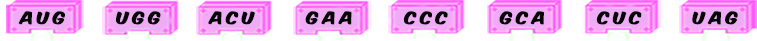
<style>
.page{position:relative;width:757px;height:41px;background:#ffffff}
.page>*{position:absolute;margin:0}
.t1{font:14.5px "KomikaAxis";letter-spacing:0.2em;color:#000000;scale:1.27 1}
</style>
<div class="page">
<p class="t1" style="left:18px;top:11px;width:47px;height:14px">aug</p>
<p class="t1" style="left:116px;top:11px;width:45px;height:14px">ugg</p>
<p class="t1" style="left:208px;top:11px;width:47px;height:14px">acu</p>
<p class="t1" style="left:305px;top:11px;width:47px;height:14px">gaa</p>
<p class="t1" style="left:403px;top:11px;width:45px;height:14px">ccc</p>
<p class="t1" style="left:499px;top:11px;width:45px;height:14px">gca</p>
<p class="t1" style="left:596px;top:11px;width:46px;height:14px">cuc</p>
<p class="t1" style="left:692px;top:11px;width:46px;height:14px">uag</p>
</div>
